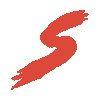
<style>
.page{position:relative;width:100px;height:100px;background:#ffffff}
.page>*{position:absolute;margin:0}
.t1{font:150px "ScrambleStormRegular";color:#dc493a}
</style>
<div class="page">
<p class="t1" style="left:10px;top:10px;width:79px;height:80px">s</p>
</div>
